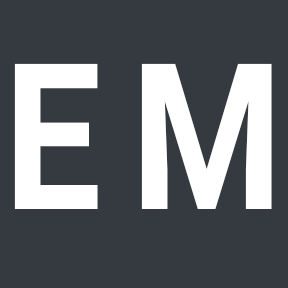
<style>
.page{position:relative;width:288px;height:288px;background:#343a40}
.page>*{position:absolute;margin:0}
.t1{font:204.2px "Roboto-Bold";letter-spacing:-0.04em;color:#ffffff;scale:0.85 1}
</style>
<div class="page">
<p class="t1" style="left:14px;top:63px;width:258px;height:146px">E M</p>
</div>
